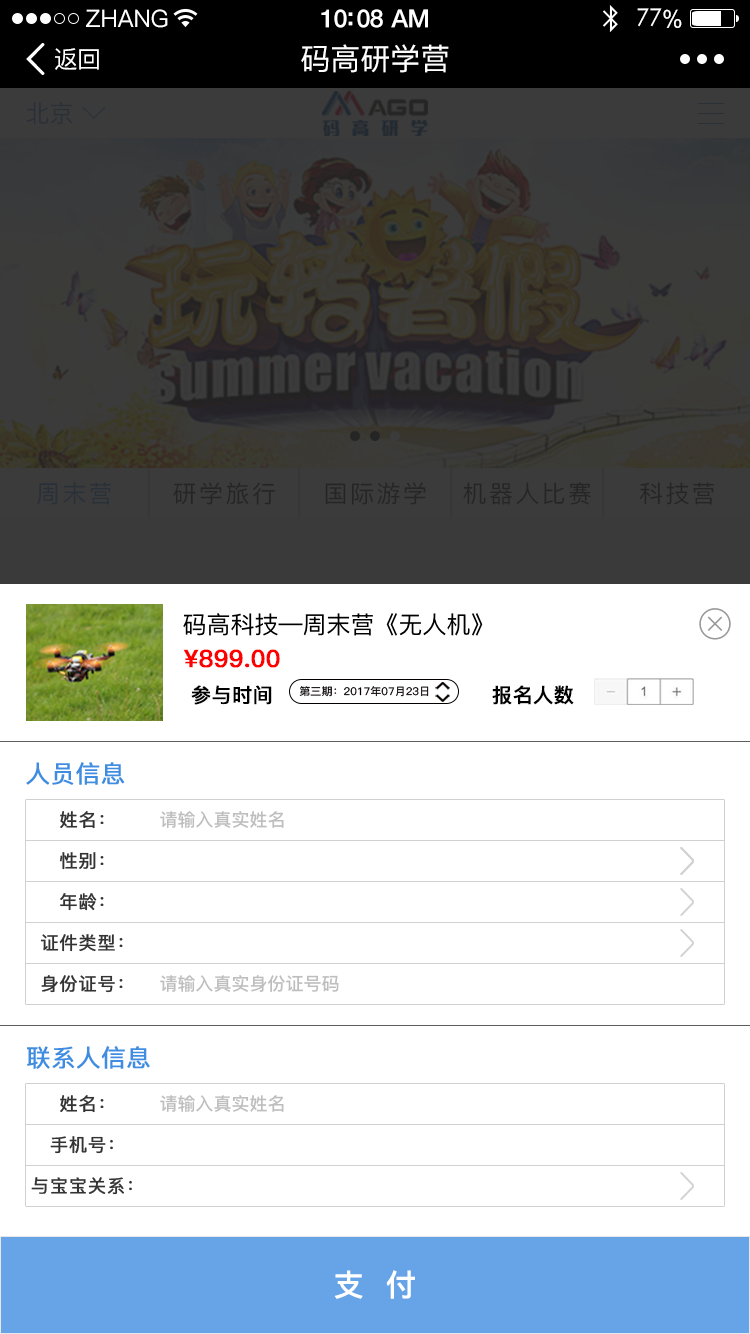
<style>
.page{position:relative;width:750px;height:1334px;background:#ffffff}
.page>*{position:absolute;margin:0}
.t1{font:24px "PingFang-SC-Medium";color:#ffffff}
.t2{font:25px "HelveticaNeue-Medium";letter-spacing:-0.02em;color:#ffffff}
.t3{font:24px "STXihei";letter-spacing:-0.02em;color:#ffffff}
.t4{font:24px "ArialUnicodeMS";letter-spacing:-0.02em;color:#ffffff}
.t5{font:24px "PingFang-SC-Medium";letter-spacing:-0.02em;color:#ffffff}
.t6{font:30px "PingFang-SC-Medium";color:#ffffff}
.t7{font:24px "PingFang-SC-Medium";color:#293038}
.t8{font:24px "PingFang-SC-Medium";letter-spacing:0.1em;color:#293038}
.t9{font:24px "PingFang-SC-Medium";letter-spacing:0.1em;color:#181818}
.t10{font:24px "PingFang-SC-Medium";color:#000000}
.t11{font:24px "PingFang-SC-Bold";color:#ff0000;font-weight:bold}
.t12{font:20px "PingFang-SC-Bold";color:#000000;font-weight:bold}
.t13{font:10.6px "PingFang-SC-Medium";color:#040000;scale:1.05 1}
.t14{font:24px "PingFang-SC-Medium";color:#408ce1;font-weight:bold}
.t15{font:18px "PingFang-SC-Medium";color:#333333;font-weight:bold}
.t16{font:18px "PingFang-SC-Bold";color:#bebebe}
.t17{font:30px "PingFang-SC-Bold";color:#ffffff;font-weight:bold}
</style>
<div class="page">
<p class="t1" style="left:86px;top:9px;width:82px;height:19px">ZHANG</p>
<p class="t2" style="left:321px;top:9px;width:107px;height:19px">10:08 AM</p>
<p class="t3" style="left:637px;top:8px;width:45px;height:20px">77<span class="t4">%</span></p>
<p class="t5" style="left:55px;top:48px;width:44px;height:22px">返回</p>
<p class="t6" style="left:301px;top:44px;width:148px;height:29px">码高研学营</p>
<p class="t7" style="left:26px;top:102px;width:47px;height:22px">北京</p>
<p class="t8" style="left:37px;top:482px;width:74px;height:23px">周末营</p>
<p class="t9" style="left:173px;top:482px;width:102px;height:23px">研学旅行</p>
<p class="t9" style="left:325px;top:482px;width:101px;height:23px">国际游学</p>
<p class="t9" style="left:463px;top:482px;width:128px;height:23px">机器人比赛</p>
<p class="t9" style="left:639px;top:482px;width:75px;height:23px">科技营</p>
<p class="t10" style="left:183px;top:613px;width:300px;height:23px">码高科技—周末营《无人机》</p>
<p class="t11" style="left:183px;top:649px;width:97px;height:19px">¥899.00</p>
<p class="t12" style="left:191px;top:685px;width:81px;height:20px">参与时间</p>
<p class="t13" style="left:299px;top:686px;width:130px;height:11px">第三期：2017年07月23日</p>
<p class="t12" style="left:492px;top:685px;width:82px;height:20px">报名人数</p>
<p class="t14" style="left:26px;top:762px;width:99px;height:23px">人员信息</p>
<p class="t15" style="left:60px;top:811px;width:44px;height:18px">姓名：</p>
<p class="t16" style="left:160px;top:811px;width:124px;height:17px">请输入真实姓名</p>
<p class="t15" style="left:59px;top:852px;width:45px;height:18px">性别：</p>
<p class="t15" style="left:60px;top:893px;width:44px;height:18px">年龄：</p>
<p class="t15" style="left:40px;top:934px;width:83px;height:18px">证件类型：</p>
<p class="t15" style="left:41px;top:975px;width:82px;height:18px">身份证号：</p>
<p class="t16" style="left:160px;top:975px;width:179px;height:17px">请输入真实身份证号码</p>
<p class="t14" style="left:27px;top:1046px;width:123px;height:23px">联系人信息</p>
<p class="t15" style="left:60px;top:1095px;width:44px;height:18px">姓名：</p>
<p class="t16" style="left:160px;top:1095px;width:124px;height:17px">请输入真实姓名</p>
<p class="t15" style="left:50px;top:1136px;width:63px;height:18px">手机号：</p>
<p class="t15" style="left:31px;top:1177px;width:101px;height:18px">与宝宝关系：</p>
<p class="t17" style="left:334px;top:1270px;width:81px;height:29px">支  付</p>
</div>
